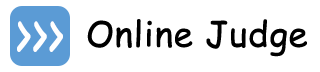
<style>
.page{position:relative;width:320px;height:72px;background:#ffffff}
.page>*{position:absolute;margin:0}
.t1{font:65.7px "ComicSansMS";color:#ffffff;font-weight:bold;scale:0.61 1}
.t2{font:34.7px "ComicSansMS";color:#000000;font-weight:bold}
</style>
<div class="page">
<p class="t1" style="left:17px;top:21px;width:46px;height:31px">&gt;&gt;&gt;</p>
<p class="t2" style="left:87px;top:19px;width:220px;height:38px">Online Judge</p>
</div>
